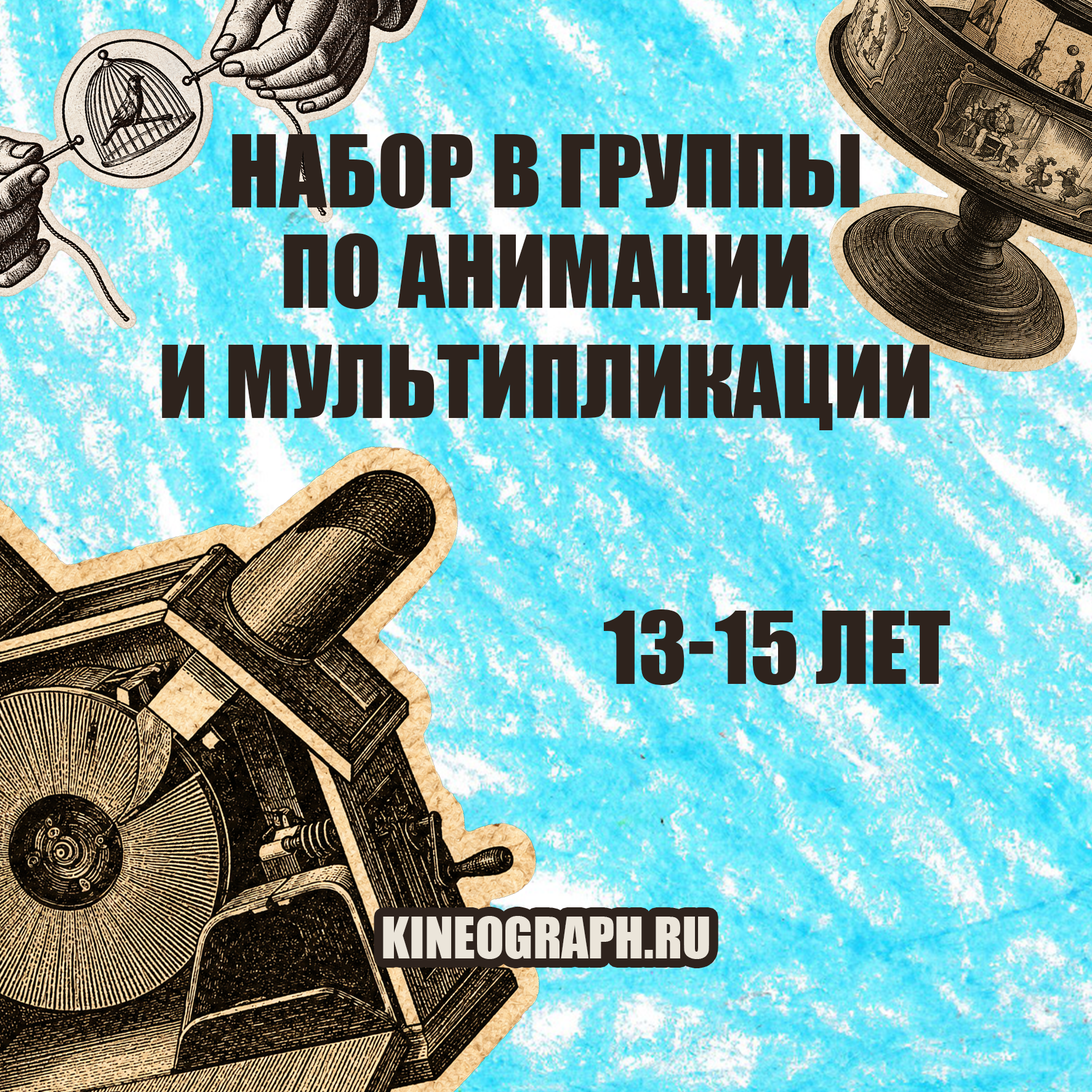
<style>
.page{position:relative;width:1092px;height:1092px}
.page>*{position:absolute;margin:0}
.t1{font:92.3px "Impact";color:#2e231d;text-transform:uppercase}
.t2{font:52.8px "Impact";color:#ebe5da;text-transform:uppercase}
</style>
<div class="page">
<p class="t1" style="left:232px;top:133px;width:628px;height:76px">Набор в группы</p>
<p class="t1" style="left:284px;top:233px;width:524px;height:87px">по анимации</p>
<p class="t1" style="left:162px;top:345px;width:767px;height:85px">и мультипликации</p>
<p class="t1" style="left:603px;top:609px;width:347px;height:76px">13-15 лет</p>
<p class="t2" style="left:383px;top:916px;width:326px;height:43px">kineograph.ru</p>
</div>
